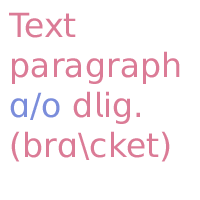
<style>
.page{position:relative;width:200px;height:200px;background:#ffffff}
.page>*{position:absolute;margin:0}
.t1{font:33.3px "DejaVuSans";color:#db7b96}
.t2{font:33.3px "DejaVuSans";color:#7b8ddb}
</style>
<div class="page">
<p class="t1" style="left:9px;top:12px;width:171px;height:150px">Text paragraph <span class="t2">a/o</span> dlig.<br>(bra\cket)</p>
</div>
